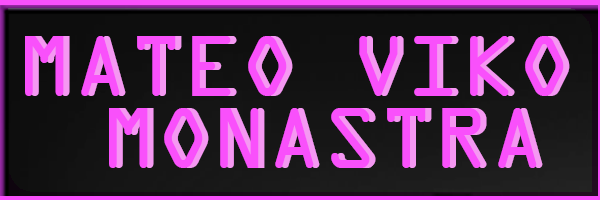
<style>
.page{position:relative;width:600px;height:200px}
.page>*{position:absolute;margin:0}
.t1{font:92px/12px "OCRAExtended";color:#f950fb}
.t2{font:92px/12px "OCRAExtended"}
</style>
<div class="page">
<p class="t1" style="left:25px;top:36px;width:539px;height:132px;text-align:center">MATEO VIKO <br><br><br><br><br><br>MONASTRA</p>
<p class="t2" style="left:31px;top:36px;width:539px;height:132px;text-align:center">MATEO VIKO <br><br><br><br><br><br>MONASTRA</p>
</div>
